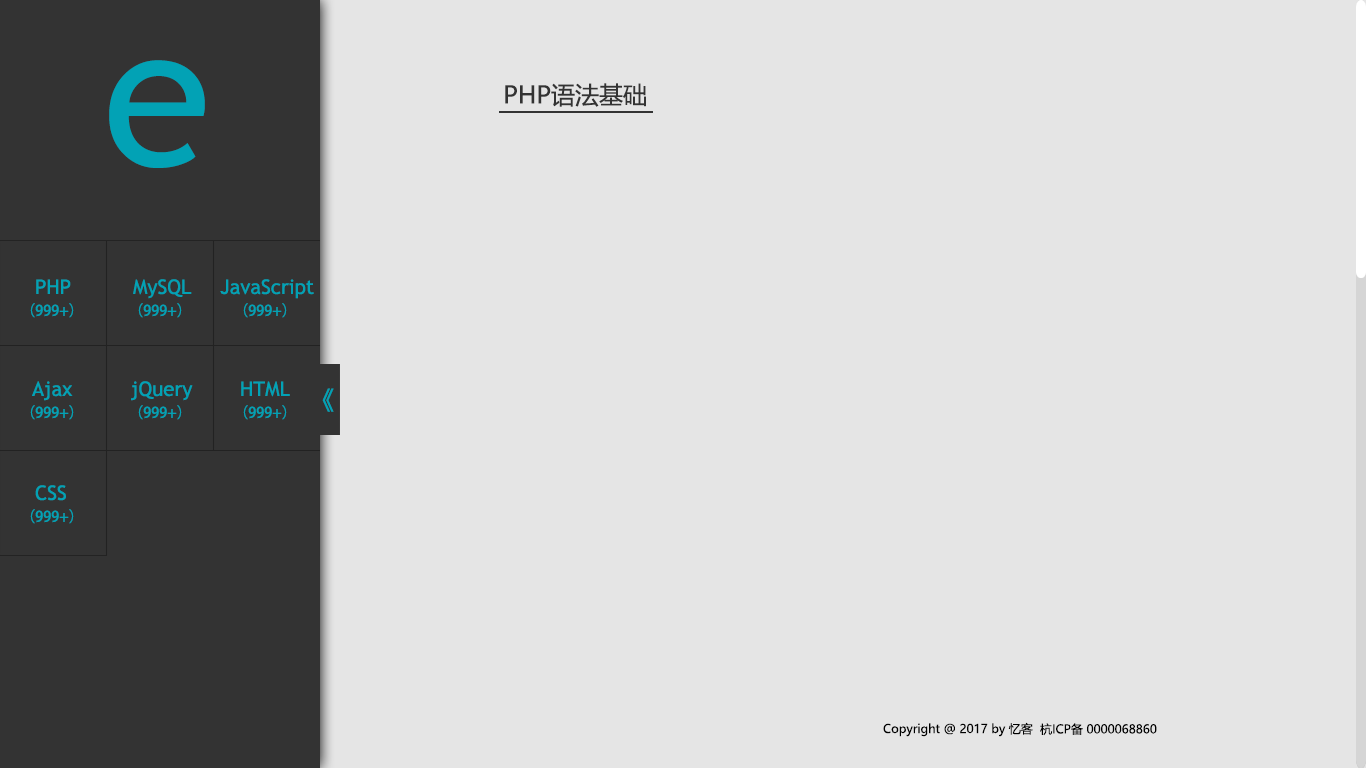
<style>
.page{position:relative;width:1366px;height:768px;background:#e5e5e5}
.page>*{position:absolute;margin:0}
.t1{font:198.3px "TrebuchetMS";color:#02a2b5}
.t2{font:24px "MicrosoftYaHei";color:#333333}
.t3{font:20.1px "TrebuchetMS";color:#02a2b5}
.t4{font:14.6px "AdobeHeitiStd-Regular";color:#02a2b5}
.t5{font:24px "MicrosoftYaHei";color:#02a2b5}
.t6{font:12px "MicrosoftYaHei";color:#000000}
</style>
<div class="page">
<p class="t1" style="left:109px;top:60px;width:96px;height:108px">e</p>
<p class="t2" style="left:505px;top:83px;width:141px;height:24px">PHP语法基础</p>
<p class="t3" style="left:36px;top:279px;width:35px;height:15px">PHP</p>
<p class="t3" style="left:133px;top:279px;width:59px;height:20px">MySQL</p>
<p class="t3" style="left:220px;top:279px;width:94px;height:20px">JavaScript</p>
<p class="t4" style="left:30px;top:303px;width:44px;height:15px">（999+）</p>
<p class="t4" style="left:138px;top:303px;width:44px;height:15px">（999+）</p>
<p class="t4" style="left:243px;top:303px;width:44px;height:15px">（999+）</p>
<p class="t3" style="left:32px;top:381px;width:41px;height:20px">Ajax</p>
<p class="t3" style="left:131px;top:381px;width:62px;height:20px">jQuery</p>
<p class="t3" style="left:241px;top:381px;width:49px;height:16px">HTML</p>
<p class="t5" style="left:322px;top:388px;width:12px;height:24px">《</p>
<p class="t4" style="left:30px;top:405px;width:44px;height:15px">（999+）</p>
<p class="t4" style="left:138px;top:405px;width:44px;height:15px">（999+）</p>
<p class="t4" style="left:243px;top:405px;width:44px;height:15px">（999+）</p>
<p class="t3" style="left:35px;top:485px;width:31px;height:16px">CSS</p>
<p class="t4" style="left:30px;top:509px;width:44px;height:15px">（999+）</p>
<p class="t6" style="left:883px;top:722px;width:150px;height:15px">Copyright @ 2017 by 忆客</p>
<p class="t6" style="left:1040px;top:723px;width:117px;height:13px">杭ICP备 0000068860</p>
</div>
